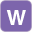
<style>
.page{position:relative;width:32px;height:32px;background:#7d65ac}
.page>*{position:absolute;margin:0}
.t1{font:21px "Helvetica-Bold";color:#ffffff}
</style>
<div class="page">
<p class="t1" style="left:6px;top:10px;width:20px;height:15px">W</p>
</div>
